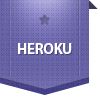
<style>
.page{position:relative;width:100px;height:100px;background:#ffffff}
.page>*{position:absolute;margin:0}
.t1{font:15px "MyriadPro-Bold";letter-spacing:-0.025em;color:#ffffff;text-transform:uppercase}
</style>
<div class="page">
<p class="t1" style="left:18px;top:43px;width:54px;height:11px">Heroku</p>
</div>
